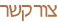
<style>
.page{position:relative;width:57px;height:22px;background:#ffffff}
.page>*{position:absolute;margin:0}
.t1{font:21.6px "MyriadHebrew-Regular";letter-spacing:-0.09em;color:#ad7344}
</style>
<div class="page">
<p class="t1" style="left:0px;top:4px;width:57px;height:17px">רשק רוצ</p>
</div>
